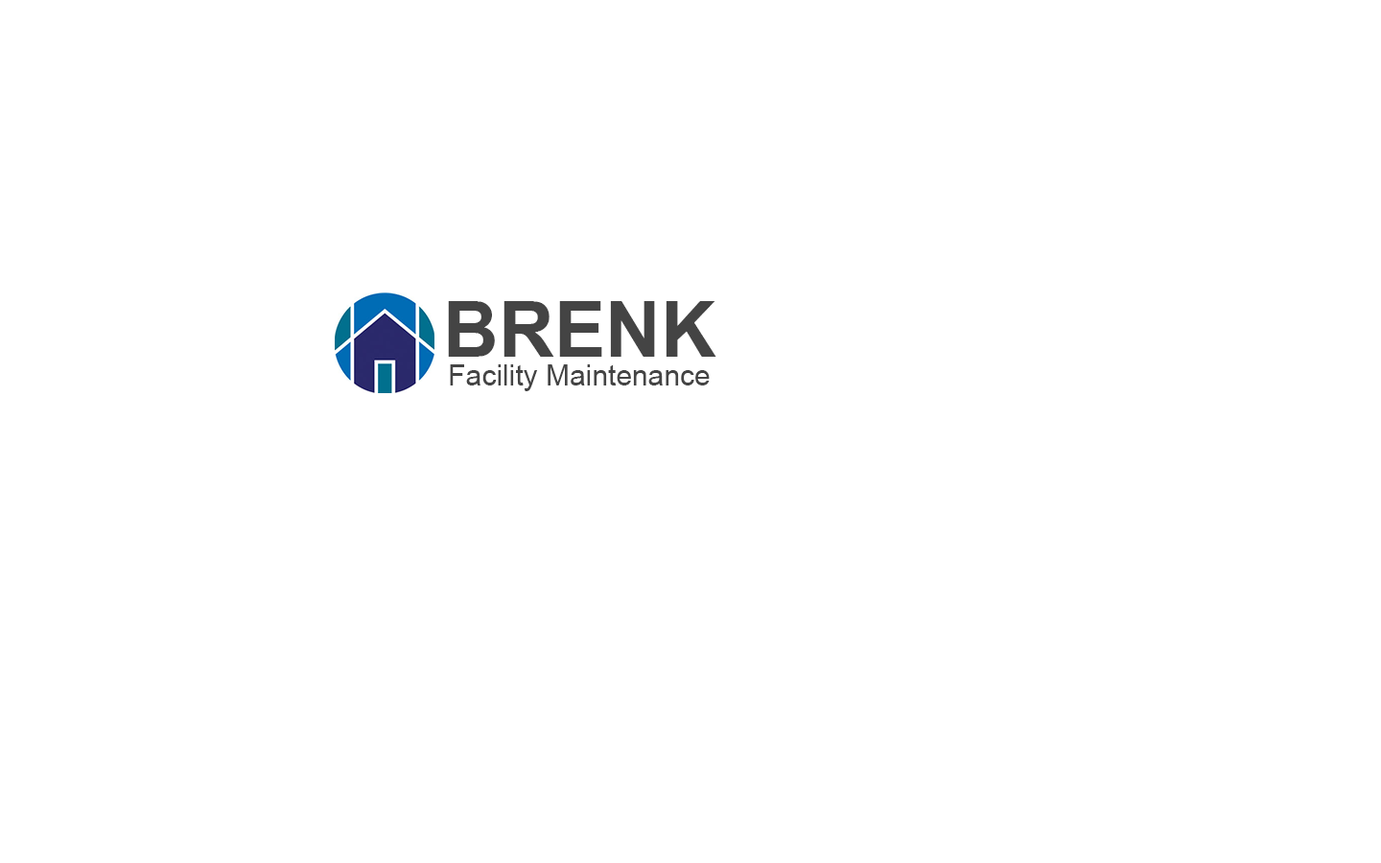
<style>
.page{position:relative;width:1381px;height:863px;background:#ffffff}
.page>*{position:absolute;margin:0}
.t1{font:76.7px "Arial-BoldMT";color:#444444}
.t2{font:28.8px "ArialMT";color:#444444}
</style>
<div class="page">
<p class="t1" style="left:448px;top:301px;width:269px;height:56px">BRENK</p>
<p class="t2" style="left:450px;top:365px;width:260px;height:26px">Facility Maintenance</p>
</div>
